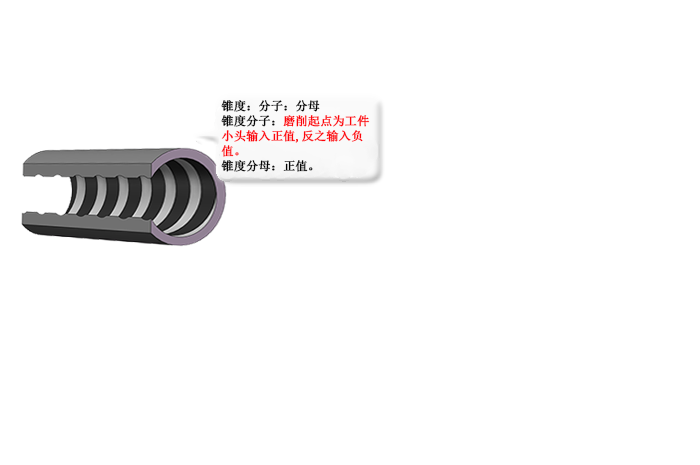
<style>
.page{position:relative;width:700px;height:465px;background:#ffffff}
.page>*{position:absolute;margin:0}
.t1{font:12px/15px "SimSun";font-weight:bold}
</style>
<div class="page">
<p class="t1" style="left:221px;top:100px;width:149px;height:72px">锥度：分子：分母<br>锥度分子：磨削起点为工件小头输入正值,反之输入负值。<br>锥度分母：正值。</p>
</div>
